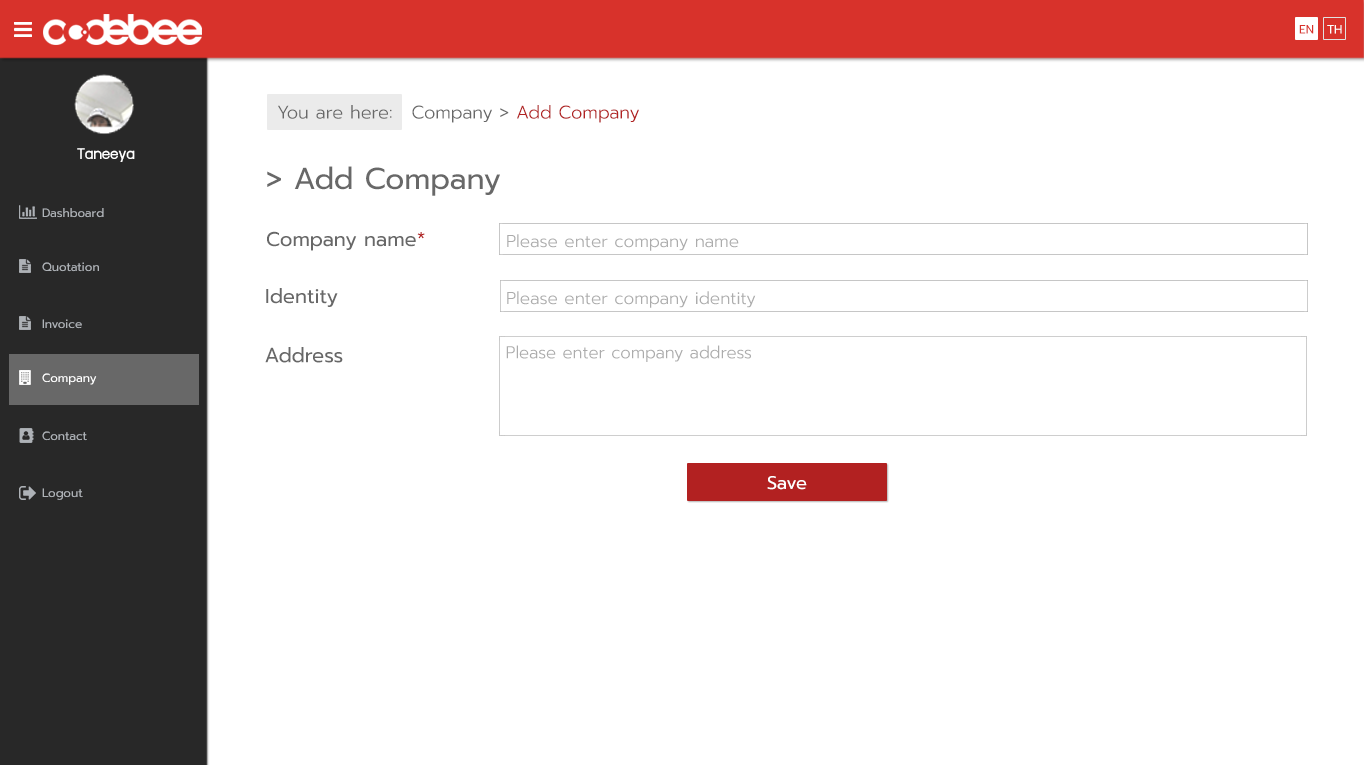
<style>
.page{position:relative;width:1364px;height:765px;background:#ffffff}
.page>*{position:absolute;margin:0}
.t1{font:12px "Prompt-Regular";color:#d8322b}
.t2{font:12px "Prompt-Regular";color:#ffffff}
.t3{font:18px "Prompt-Light";color:#686868}
.t4{font:18px "Prompt-Light";color:#b22121}
.t5{font:18px "supermarket";color:#ffffff}
.t6{font:30px "Prompt-Regular";color:#686868}
.t7{font:12px "Prompt-Regular";color:#aeb2b7}
.t8{font:20px "Prompt-Regular";color:#686868}
.t9{font:20px "Prompt-Regular";color:#b22121}
.t10{font:17px "Prompt-Light";color:#acacac}
.t11{font:20.5px "Prompt-Regular";color:#686868}
.t12{font:18px "Prompt-Regular";color:#ffffff}
</style>
<div class="page">
<p class="t1" style="left:1299px;top:25px;width:15px;height:9px">EN</p>
<p class="t2" style="left:1327px;top:25px;width:15px;height:9px">TH</p>
<p class="t3" style="left:278px;top:105px;width:114px;height:14px">You are here:</p>
<p class="t4" style="left:412px;top:105px;width:227px;height:18px"><span class="t3">Company &gt; </span>Add Company</p>
<p class="t5" style="left:77px;top:148px;width:58px;height:14px">Taneeya</p>
<p class="t6" style="left:267px;top:166px;width:233px;height:30px">&gt; Add Company</p>
<p class="t7" style="left:42px;top:208px;width:62px;height:10px">Dashboard</p>
<p class="t8" style="left:267px;top:231px;width:158px;height:20px">Company name<span class="t9">*</span></p>
<p class="t10" style="left:507px;top:234px;width:232px;height:17px">Please enter company name</p>
<p class="t7" style="left:42px;top:262px;width:57px;height:10px">Quotation</p>
<p class="t8" style="left:266px;top:288px;width:72px;height:19px">Identity</p>
<p class="t10" style="left:507px;top:291px;width:249px;height:17px">Please enter company identity</p>
<p class="t7" style="left:42px;top:319px;width:40px;height:10px">Invoice</p>
<p class="t11" style="left:265px;top:347px;width:78px;height:16px">Address</p>
<p class="t10" style="left:506px;top:345px;width:245px;height:17px">Please enter company address</p>
<p class="t2" style="left:42px;top:373px;width:55px;height:12px">Company</p>
<p class="t7" style="left:42px;top:431px;width:45px;height:10px">Contact</p>
<p class="t12" style="left:767px;top:476px;width:40px;height:14px">Save</p>
<p class="t7" style="left:42px;top:488px;width:41px;height:12px">Logout</p>
</div>
